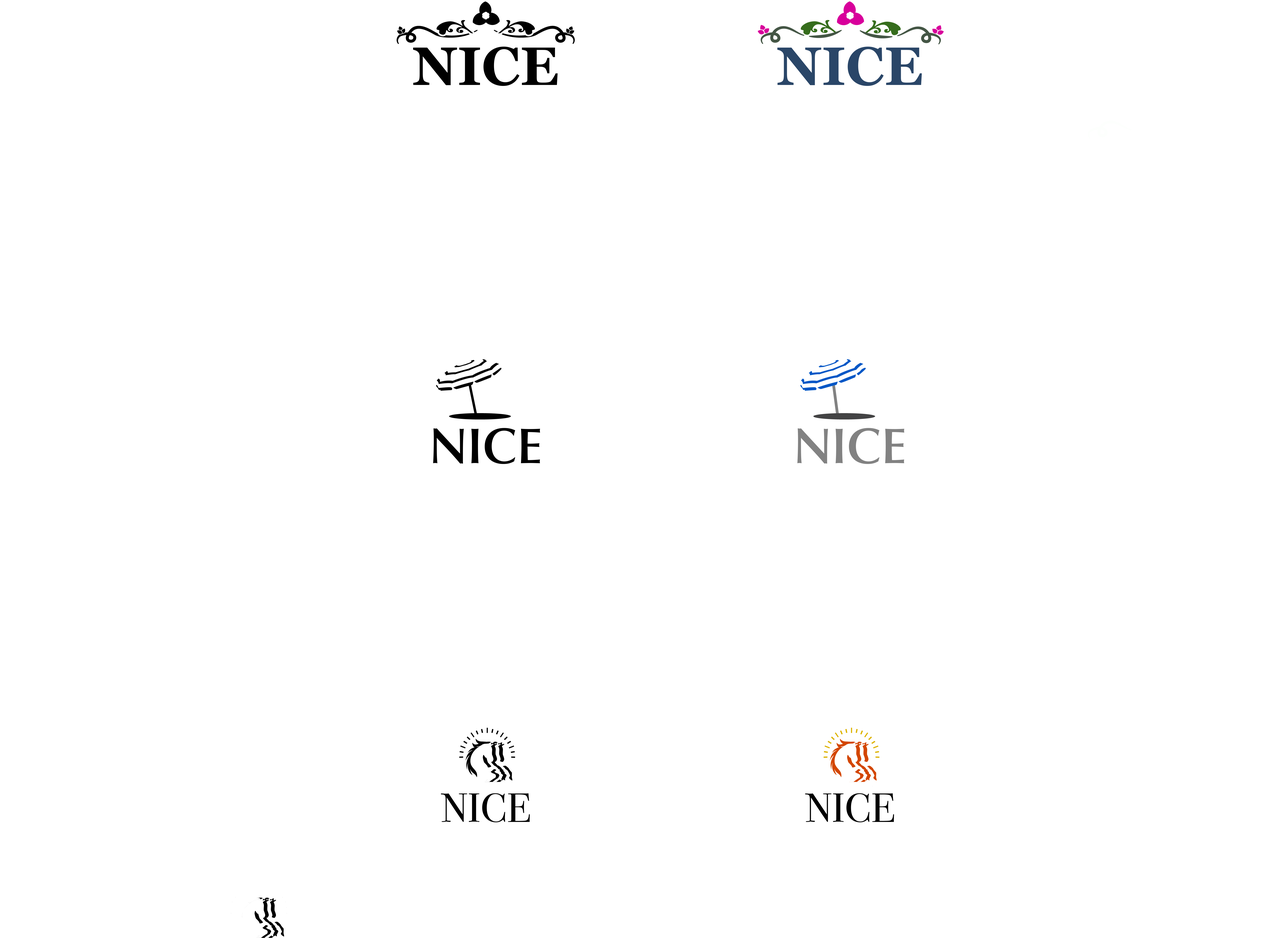
<style>
.page{position:relative;width:1271px;height:938px;background:#ffffff}
.page>*{position:absolute;margin:0}
.t1{font:53.9px "Georgia-Bold";color:#000000}
.t2{font:53.9px "Georgia-Bold";color:#2a4668}
.t3{font:51px "ClassicoURW-Med";color:#000000}
.t4{font:51px "ClassicoURW-Med";color:#828282}
.t5{font:40.6px "BodoniSvtyTwoSCITCTT-Book";color:#000000}
</style>
<div class="page">
<p class="t1" style="left:413px;top:47px;width:145px;height:39px">NICE</p>
<p class="t2" style="left:777px;top:47px;width:145px;height:39px">NICE</p>
<p class="t3" style="left:433px;top:428px;width:107px;height:36px">NICE</p>
<p class="t4" style="left:797px;top:428px;width:108px;height:36px">NICE</p>
<p class="t5" style="left:441px;top:793px;width:89px;height:29px">NICE</p>
<p class="t5" style="left:805px;top:793px;width:89px;height:29px">NICE</p>
</div>
